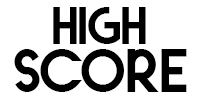
<style>
.page{position:relative;width:200px;height:100px;background:#ffffff}
.page>*{position:absolute;margin:0}
.t1{font:52.7px "SUNDAYPersonaluse";color:#000000}
.t2{font:61.1px "SUNDAYPersonaluse";color:#000000}
</style>
<div class="page">
<p class="t1" style="left:53px;top:7px;width:93px;height:37px">HIGH</p>
<p class="t2" style="left:14px;top:49px;width:173px;height:43px">SCORE</p>
</div>
